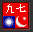
<style>
.page{position:relative;width:33px;height:32px;background:#f20000}
.page>*{position:absolute;margin:0}
.t1{font:10.4px "SimSun";color:#ffffff}
</style>
<div class="page">
<p class="t1" style="left:6px;top:4px;width:20px;height:9px">九七</p>
</div>
